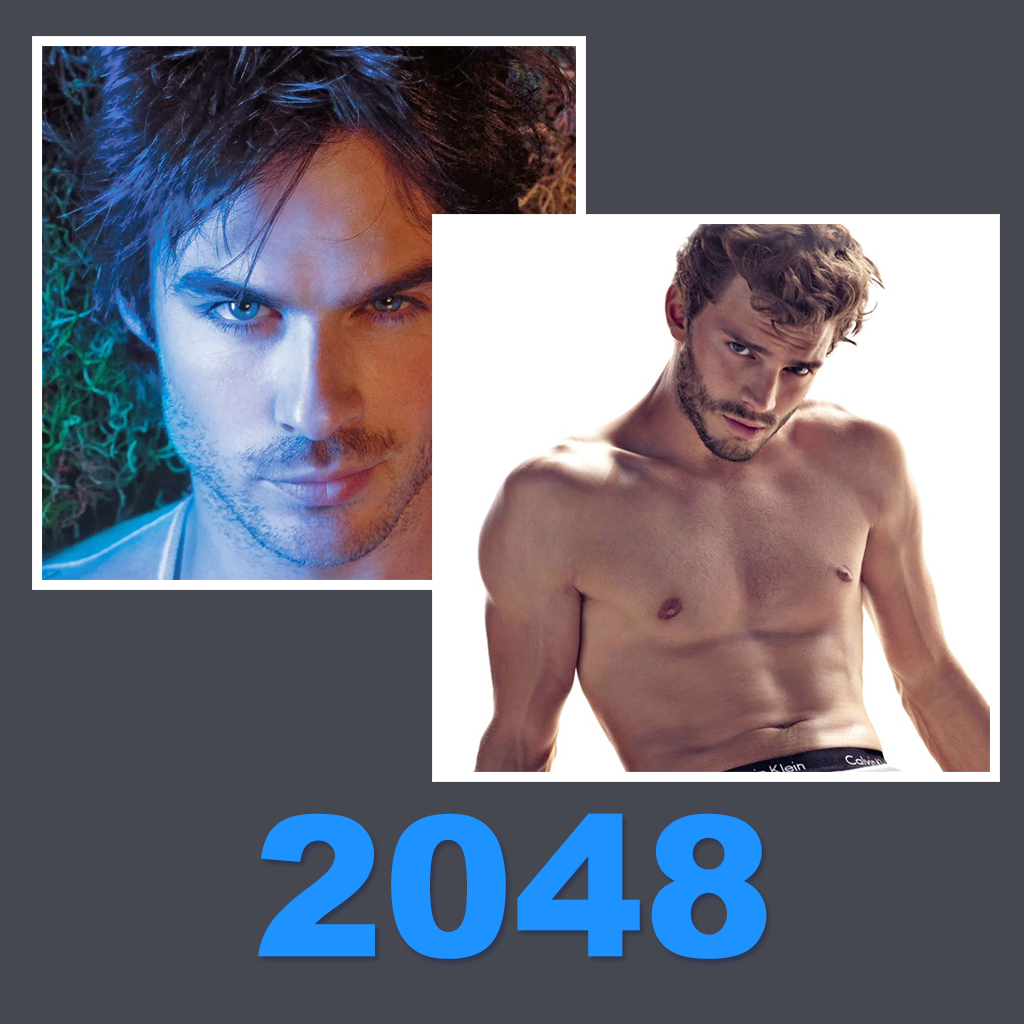
<style>
.page{position:relative;width:1024px;height:1024px;background:#454850}
.page>*{position:absolute;margin:0}
.t1{font:195.3px "Arial-Black";color:#1e92ff}
</style>
<div class="page">
<p class="t1" style="left:258px;top:813px;width:509px;height:146px">2048</p>
</div>
